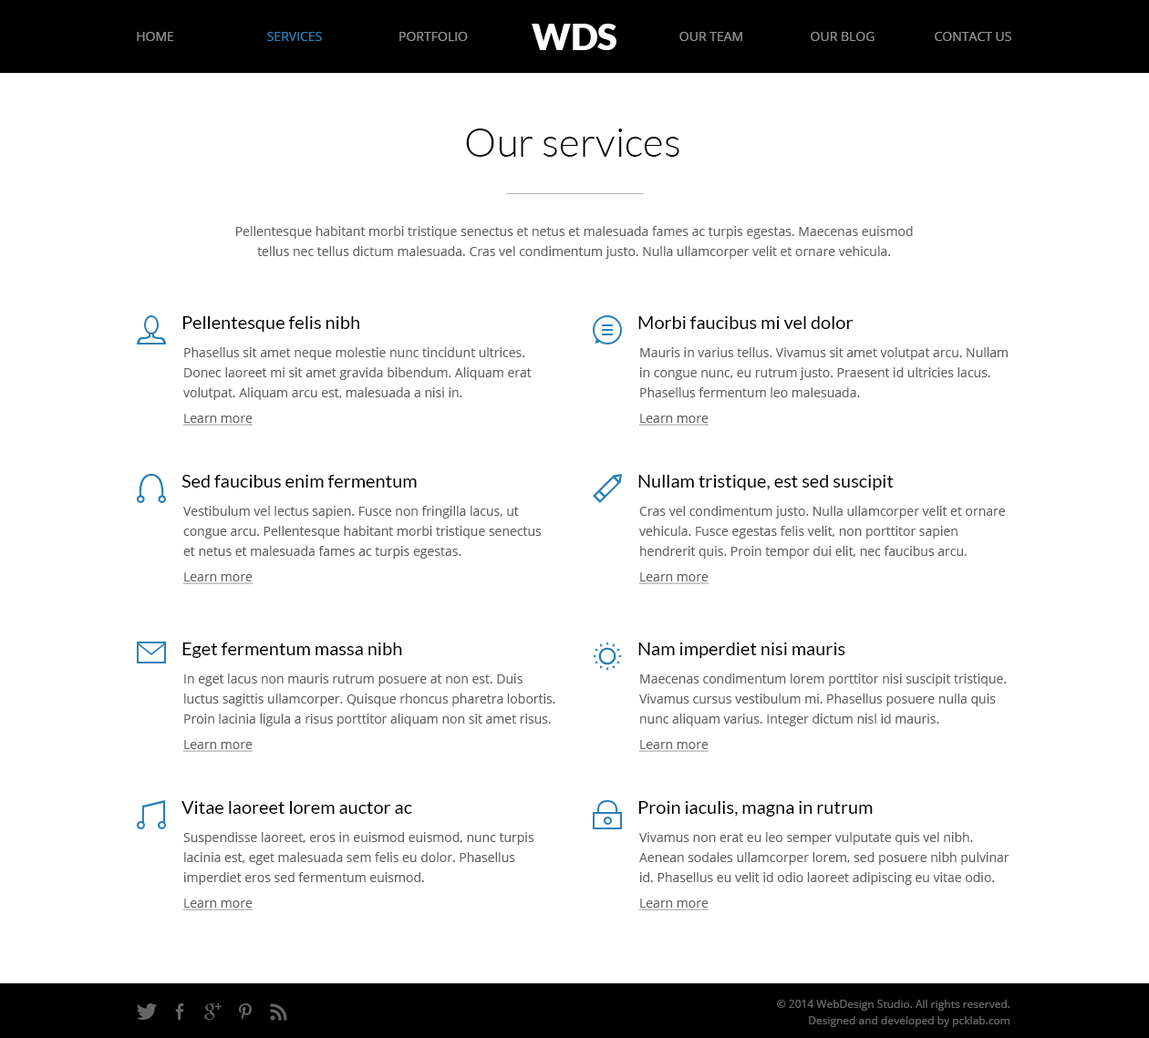
<style>
.page{position:relative;width:1149px;height:1038px;background:#ffffff}
.page>*{position:absolute;margin:0}
.t1{font:36.5px "Lato-Black";color:#ffffff;text-transform:uppercase}
.t2{font:12.8px "OpenSans";color:#909090;text-transform:uppercase}
.t3{font:12.8px "OpenSans";color:#2980b9;text-transform:uppercase}
.t4{font:40.1px "Lato-Light";color:#000000}
.t5{font:12.8px/20.1px "OpenSans";color:#606060}
.t6{font:18.2px "Lato-Regular";color:#000000}
.t7{font:12.8px/25.5px "OpenSans";color:#606060;text-decoration:underline}
.t8{font:10.9px/16.4px "OpenSans";color:#666666}
</style>
<div class="page">
<p class="t1" style="left:531px;top:24px;width:85px;height:26px">WDs</p>
<p class="t2" style="left:137px;top:32px;width:37px;height:9px">home</p>
<p class="t3" style="left:267px;top:32px;width:55px;height:9px">services</p>
<p class="t2" style="left:399px;top:32px;width:69px;height:9px">Portfolio</p>
<p class="t2" style="left:679px;top:32px;width:63px;height:9px">our team</p>
<p class="t2" style="left:810px;top:32px;width:64px;height:9px">our blog</p>
<p class="t2" style="left:934px;top:32px;width:77px;height:9px">Contact us</p>
<p class="t4" style="left:466px;top:129px;width:213px;height:28px">Our services</p>
<p class="t5" style="left:236px;top:226px;width:676px;height:33px;text-align:center">Pellentesque habitant morbi tristique senectus et netus et malesuada fames ac turpis egestas. Maecenas euismod tellus nec tellus dictum malesuada. Cras vel condimentum justo. Nulla ullamcorper velit et ornare vehicula.</p>
<p class="t6" style="left:182px;top:316px;width:177px;height:16px">Pellentesque felis nibh</p>
<p class="t6" style="left:638px;top:316px;width:215px;height:13px">Morbi faucibus mi vel dolor</p>
<p class="t5" style="left:183px;top:347px;width:348px;height:79px">Phasellus sit amet neque molestie nunc tincidunt ultrices. Donec laoreet mi sit amet gravida bibendum. Aliquam erat volutpat. Aliquam arcu est, malesuada a nisi in.<br><span class="t7">Learn more</span></p>
<p class="t5" style="left:639px;top:347px;width:368px;height:79px">Mauris in varius tellus. Vivamus sit amet volutpat arcu. Nullam in congue nunc, eu rutrum justo. Praesent id ultricies lacus. Phasellus fermentum leo malesuada.<br><span class="t7">Learn more</span></p>
<p class="t6" style="left:181px;top:475px;width:236px;height:13px">Sed faucibus enim fermentum</p>
<p class="t6" style="left:638px;top:475px;width:255px;height:15px">Nullam tristique, est sed suscipit</p>
<p class="t5" style="left:183px;top:506px;width:358px;height:78px">Vestibulum vel lectus sapien. Fusce non fringilla lacus, ut congue arcu. Pellentesque habitant morbi tristique senectus et netus et malesuada fames ac turpis egestas.<br><span class="t7">Learn more</span></p>
<p class="t5" style="left:639px;top:506px;width:366px;height:78px">Cras vel condimentum justo. Nulla ullamcorper velit et ornare vehicula. Fusce egestas felis velit, non porttitor sapien hendrerit quis. Proin tempor dui elit, nec faucibus arcu.<br><span class="t7">Learn more</span></p>
<p class="t6" style="left:182px;top:643px;width:220px;height:15px">Eget fermentum massa nibh</p>
<p class="t6" style="left:638px;top:643px;width:207px;height:15px">Nam imperdiet nisi mauris</p>
<p class="t5" style="left:183px;top:674px;width:372px;height:78px">In eget lacus non mauris rutrum posuere at non est. Duis luctus sagittis ullamcorper. Quisque rhoncus pharetra lobortis. Proin lacinia ligula a risus porttitor aliquam non sit amet risus.<br><span class="t7">Learn more</span></p>
<p class="t5" style="left:639px;top:674px;width:367px;height:78px">Maecenas condimentum lorem porttitor nisi suscipit tristique. Vivamus cursus vestibulum mi. Phasellus posuere nulla quis nunc aliquam varius. Integer dictum nisl id mauris.<br><span class="t7">Learn more</span></p>
<p class="t6" style="left:181px;top:801px;width:231px;height:13px">Vitae laoreet lorem auctor ac</p>
<p class="t6" style="left:638px;top:801px;width:234px;height:16px">Proin iaculis, magna in rutrum</p>
<p class="t5" style="left:183px;top:832px;width:351px;height:79px">Suspendisse laoreet, eros in euismod euismod, nunc turpis lacinia est, eget malesuada sem felis eu dolor. Phasellus imperdiet eros sed fermentum euismod.<br><span class="t7">Learn more</span></p>
<p class="t5" style="left:639px;top:832px;width:370px;height:79px">Vivamus non erat eu leo semper vulputate quis vel nibh. Aenean sodales ullamcorper lorem, sed posuere nibh pulvinar id. Phasellus eu velit id odio laoreet adipiscing eu vitae odio.<br><span class="t7">Learn more</span></p>
<p class="t8" style="left:777px;top:1000px;width:233px;height:27px;text-align:right">© 2014 WebDesign Studio. All rights reserved.<br>Designed and developed by pcklab.com</p>
</div>
